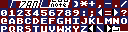
<style>
.page{position:relative;width:128px;height:32px;background:#ffffff}
.page>*{position:absolute;margin:0}
.t1{font:8px "AtariClassicChunky";color:#ffffff}
</style>
<div class="page">
<p class="t1" style="left:1px;top:9px;width:126px;height:8px">0123456789:;&lt;=&gt;?</p>
<p class="t1" style="left:1px;top:26px;width:127px;height:6px">PQRSTUVWXYZ[\]^_</p>
<p class="t1" style="left:1px;top:18px;width:126px;height:6px">@ABCDEFGHIJKLMNO</p>
</div>
